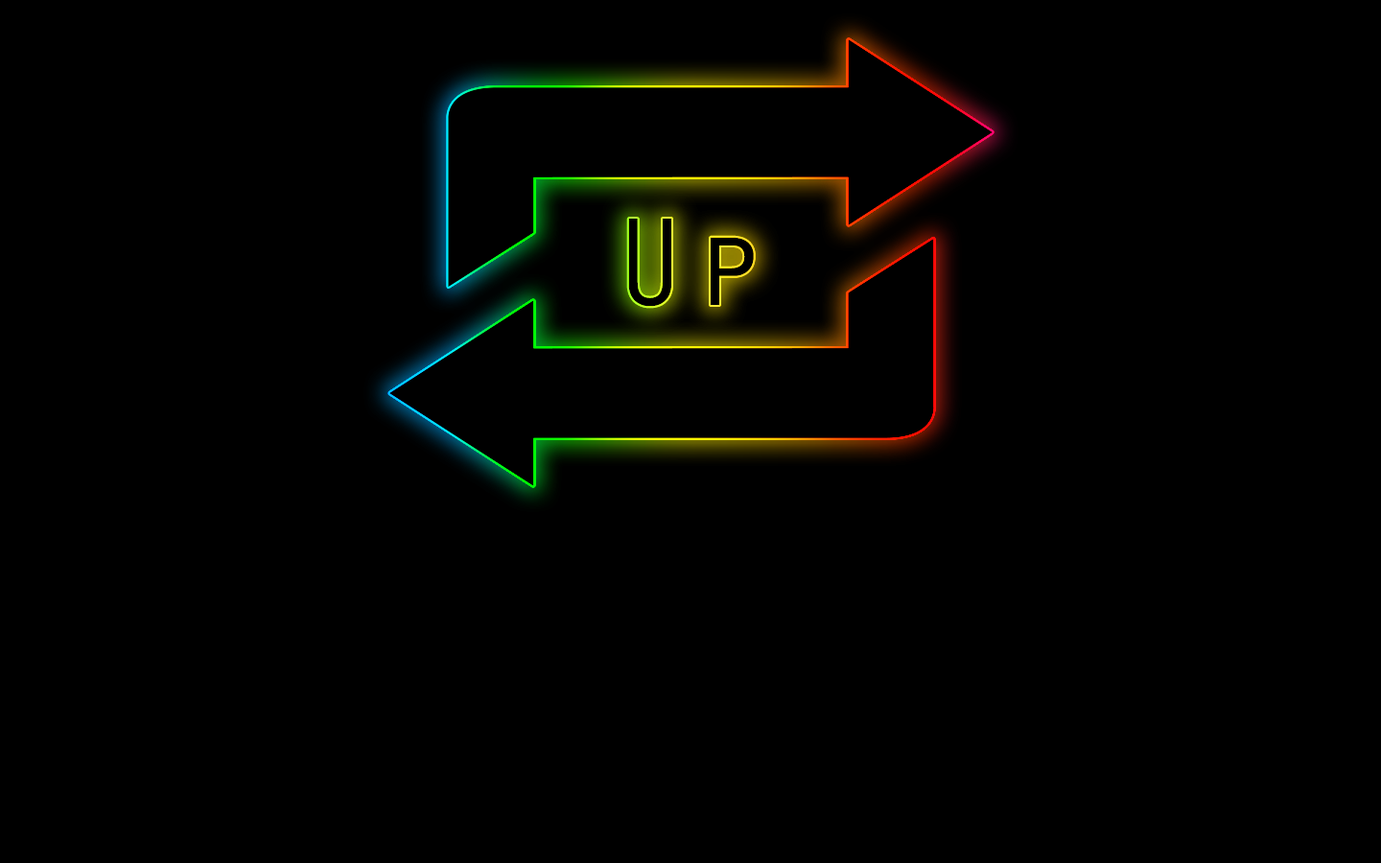
<style>
.page{position:relative;width:1381px;height:863px;background:#000000}
.page>*{position:absolute;margin:0}
.t1{font:129.6px "OratorStd";color:#000000}
</style>
<div class="page">
<p class="t1" style="left:628px;top:219px;width:126px;height:88px">Up</p>
</div>
